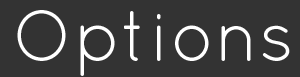
<style>
.page{position:relative;width:300px;height:77px;background:#333333}
.page>*{position:absolute;margin:0}
.t1{font:72px "Quicksand-Regular";color:#ffffff}
</style>
<div class="page">
<p class="t1" style="left:17px;top:10px;width:273px;height:66px">Options</p>
</div>
